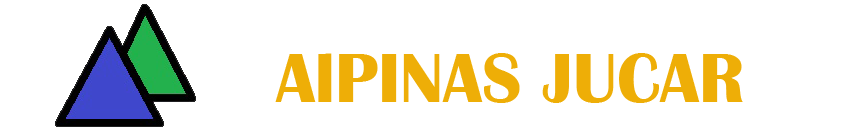
<style>
.page{position:relative;width:862px;height:138px;background:#ffffff}
.page>*{position:absolute;margin:0}
.t1{font:72px "BritannicBold";color:#eeae07}
.t2{font:72px "BritannicBold";color:#050106}
</style>
<div class="page">
<p class="t1" style="left:275px;top:53px;width:468px;height:50px"><span class="t2">       </span>AlPINAS JUCAR</p>
</div>
